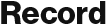
<style>
.page{position:relative;width:107px;height:25px;background:#ffffff}
.page>*{position:absolute;margin:0}
.t1{font:32px "HaasGrotDisp-75Bold";color:#111111}
.t2{font:32px "HaasGrotDisp-75Bold";letter-spacing:0.025em;color:#111111}
</style>
<div class="page">
<p class="t1" style="left:1px;top:1px;width:105px;height:23px"><span class="t2">R</span>ecord</p>
</div>
